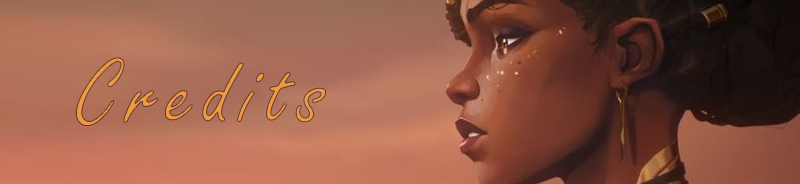
<style>
.page{position:relative;width:800px;height:184px}
.page>*{position:absolute;margin:0}
.t1{font:100px "FreestyleScript-Regular";letter-spacing:0.1em}
</style>
<div class="page">
<p class="t1" style="left:76px;top:57px;width:250px;height:69px">Credits</p>
</div>
